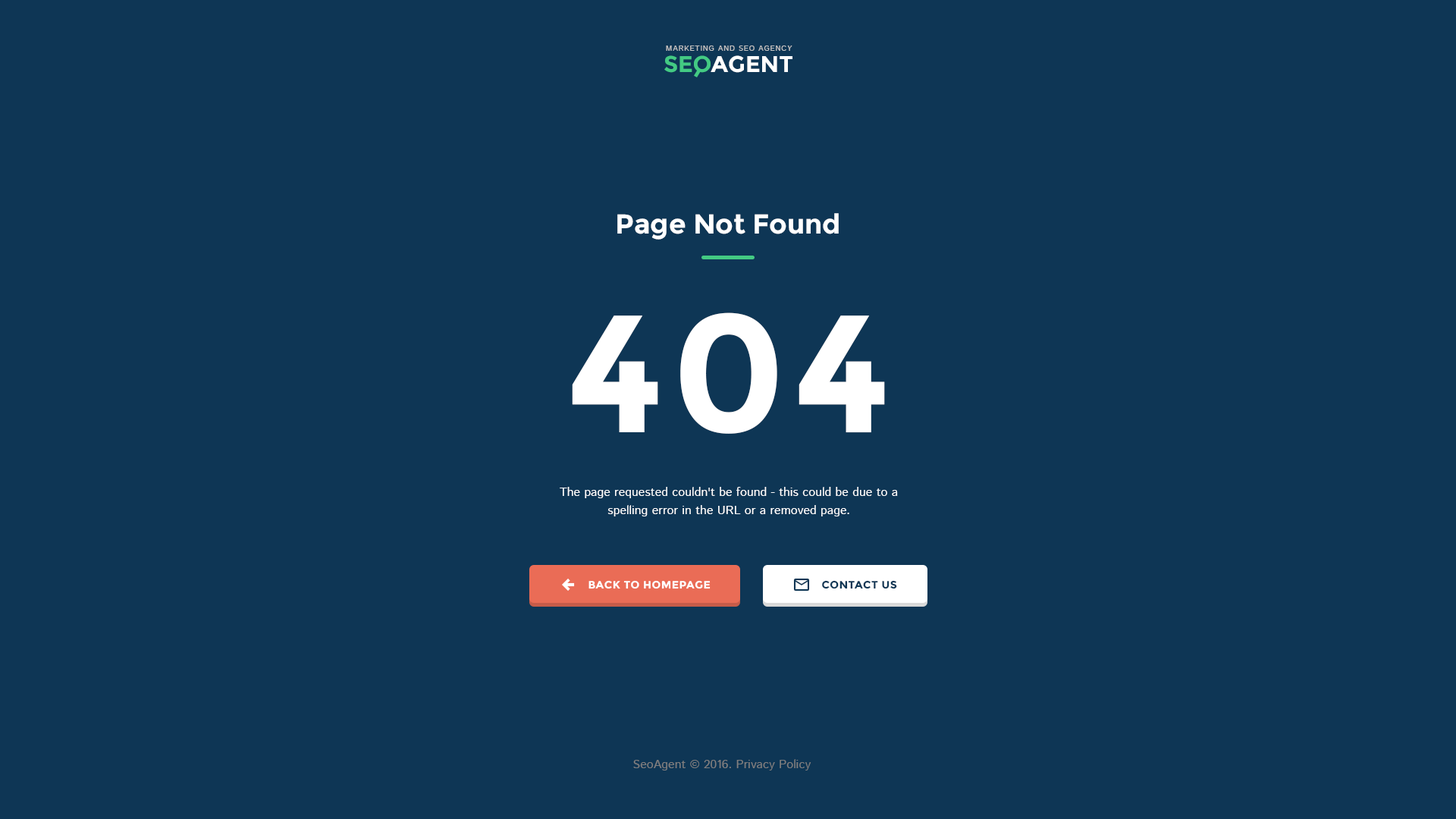
<style>
.page{position:relative;width:1456px;height:819px;background:#0e3655}
.page>*{position:absolute;margin:0}
.t1{font:7.6px "IstokWeb-Regular";letter-spacing:0.08em;color:#c1c1c1;text-transform:uppercase}
.t2{font:22.7px "Montserrat-Bold";color:#43ca83}
.t3{font:22.7px "Montserrat-Bold";color:#ffffff}
.t4{font:27.3px "Montserrat-Bold";color:#ffffff}
.t5{font:166.8px "Montserrat-Bold";letter-spacing:0.04em;color:#ffffff;text-transform:uppercase}
.t6{font:12.1px/18.2px "IstokWeb-Regular";color:#ffffff}
.t7{font:10.6px "Montserrat-Bold";letter-spacing:0.04em;color:#ffffff;text-transform:uppercase}
.t8{font:10.6px "Montserrat-Bold";letter-spacing:0.04em;color:#0e3655;text-transform:uppercase}
.t9{font:12.1px "IstokWeb-Regular";color:#7f7f7f}
</style>
<div class="page">
<p class="t1" style="left:666px;top:45px;width:126px;height:6px">Marketing and SEO agency</p>
<p class="t2" style="left:664px;top:55px;width:47px;height:18px">SEO</p>
<p class="t3" style="left:711px;top:55px;width:81px;height:18px">AGENT</p>
<p class="t4" style="left:617px;top:213px;width:222px;height:27px">Page Not Found</p>
<p class="t5" style="left:572px;top:312px;width:313px;height:122px">404</p>
<p class="t6" style="left:560px;top:487px;width:338px;height:29px;text-align:center">The page requested couldn't be found - this could be due to a spelling error in the URL or a removed page.</p>
<p class="t7" style="left:588px;top:580px;width:123px;height:9px">back to homepage</p>
<p class="t8" style="left:822px;top:580px;width:75px;height:9px">contact us</p>
<p class="t9" style="left:633px;top:759px;width:178px;height:11px">SeoAgent © 2016. Privacy Policy</p>
</div>
